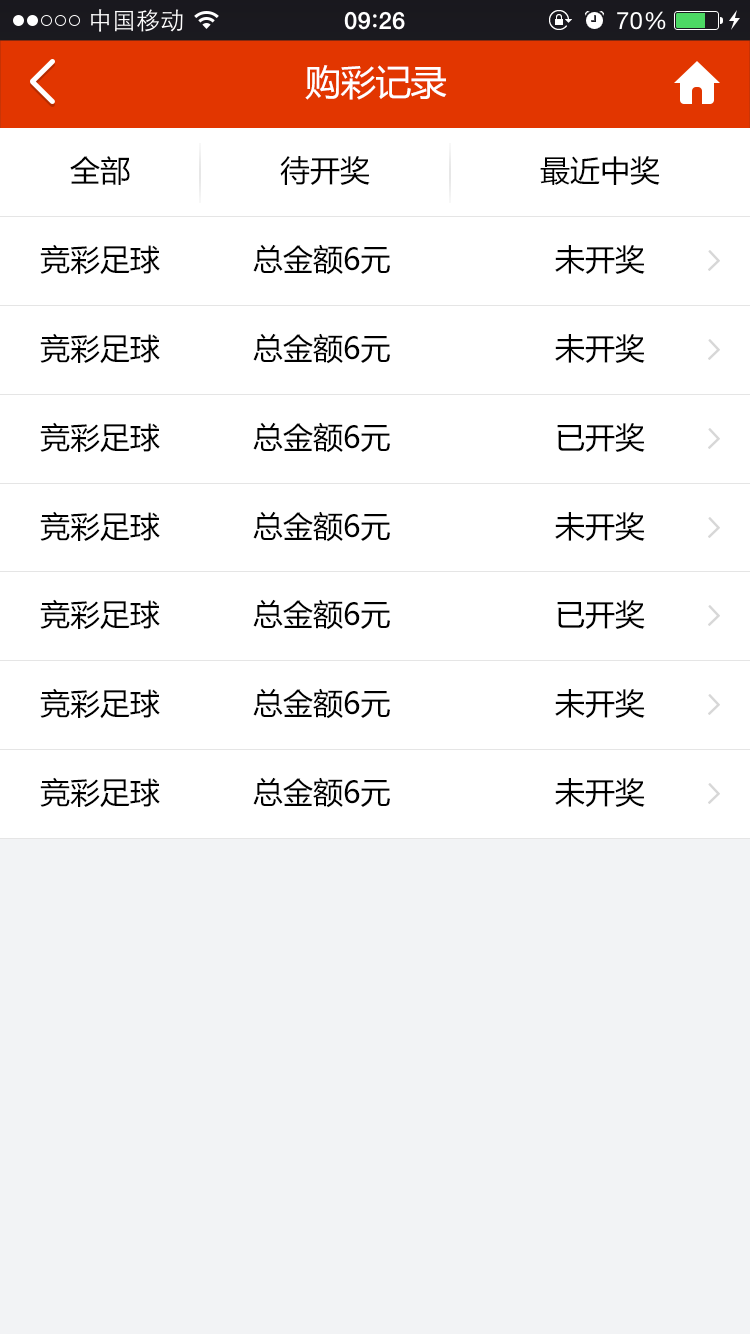
<style>
.page{position:relative;width:750px;height:1334px;background:#ffffff}
.page>*{position:absolute;margin:0}
.t1{font:36px "MicrosoftYaHei";letter-spacing:-0.025em;color:#ffffff}
.t2{font:30px "MicrosoftYaHei";color:#000000}
</style>
<div class="page">
<p class="t1" style="left:305px;top:65px;width:142px;height:35px">购彩记录</p>
<p class="t2" style="left:70px;top:156px;width:60px;height:29px">全部</p>
<p class="t2" style="left:280px;top:156px;width:90px;height:29px">待开奖</p>
<p class="t2" style="left:540px;top:156px;width:120px;height:29px">最近中奖</p>
<p class="t2" style="left:40px;top:244px;width:120px;height:31px">竞彩足球</p>
<p class="t2" style="left:253px;top:244px;width:137px;height:31px">总金额6元</p>
<p class="t2" style="left:555px;top:245px;width:90px;height:29px">未开奖</p>
<p class="t2" style="left:40px;top:333px;width:120px;height:31px">竞彩足球</p>
<p class="t2" style="left:253px;top:333px;width:137px;height:31px">总金额6元</p>
<p class="t2" style="left:555px;top:334px;width:90px;height:29px">未开奖</p>
<p class="t2" style="left:40px;top:422px;width:120px;height:31px">竞彩足球</p>
<p class="t2" style="left:253px;top:422px;width:137px;height:31px">总金额6元</p>
<p class="t2" style="left:557px;top:423px;width:88px;height:29px">已开奖</p>
<p class="t2" style="left:40px;top:511px;width:120px;height:31px">竞彩足球</p>
<p class="t2" style="left:253px;top:511px;width:137px;height:31px">总金额6元</p>
<p class="t2" style="left:555px;top:512px;width:90px;height:29px">未开奖</p>
<p class="t2" style="left:40px;top:599px;width:120px;height:31px">竞彩足球</p>
<p class="t2" style="left:253px;top:599px;width:137px;height:31px">总金额6元</p>
<p class="t2" style="left:557px;top:600px;width:88px;height:29px">已开奖</p>
<p class="t2" style="left:40px;top:688px;width:120px;height:31px">竞彩足球</p>
<p class="t2" style="left:253px;top:688px;width:137px;height:31px">总金额6元</p>
<p class="t2" style="left:555px;top:689px;width:90px;height:29px">未开奖</p>
<p class="t2" style="left:40px;top:777px;width:120px;height:31px">竞彩足球</p>
<p class="t2" style="left:253px;top:777px;width:137px;height:31px">总金额6元</p>
<p class="t2" style="left:555px;top:778px;width:90px;height:29px">未开奖</p>
</div>
